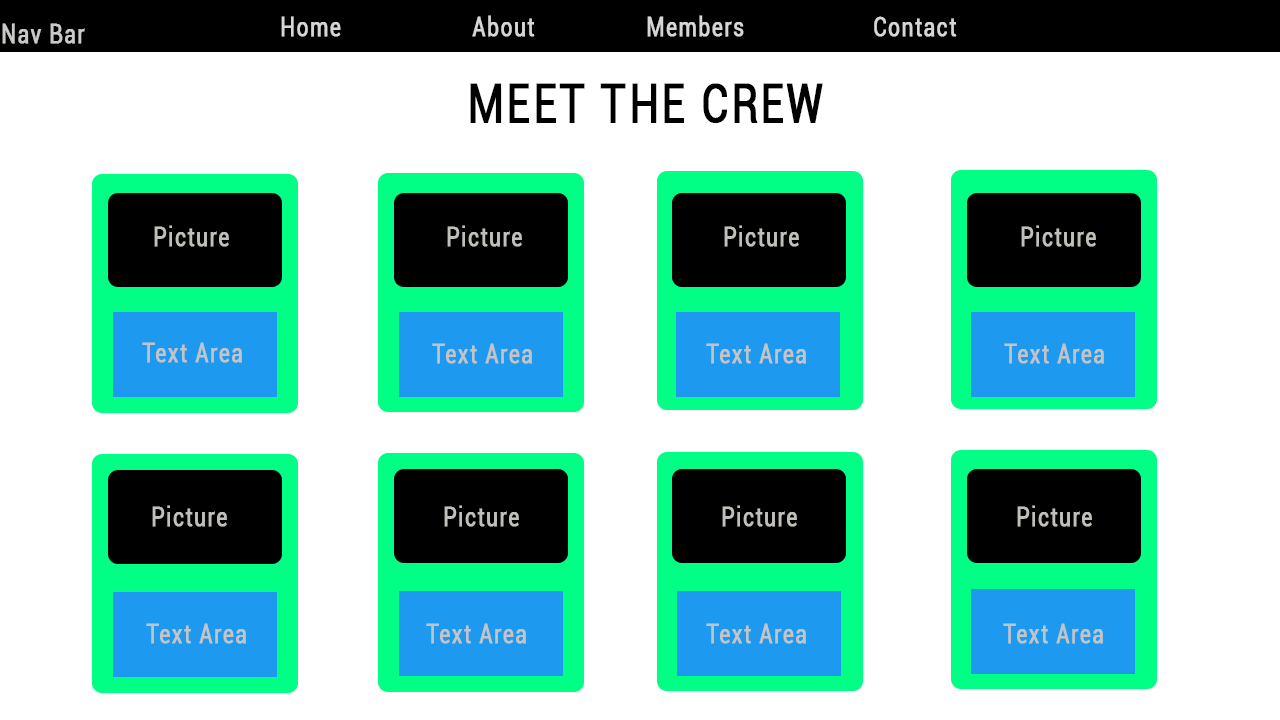
<style>
.page{position:relative;width:1280px;height:720px;background:#ffffff}
.page>*{position:absolute;margin:0}
.t1{font:27.1px "Roboto-Regular";letter-spacing:0.05em;color:#d6d6d6;font-weight:bold;scale:0.77 1}
.t2{font:27.1px "Roboto-Regular";letter-spacing:0.05em;color:#c9c9c7;font-weight:bold;scale:0.77 1}
.t3{font:54.2px "Roboto-Regular";letter-spacing:0.05em;color:#000000;font-weight:bold;scale:0.77 1}
.t4{font:27.1px "Roboto-Regular";letter-spacing:0.05em;color:#c0bfba;font-weight:bold;scale:0.77 1}
.t5{font:27.1px "Roboto-Regular";letter-spacing:0.05em;color:#c2c4c6;font-weight:bold;scale:0.77 1}
</style>
<div class="page">
<p class="t1" style="left:281px;top:16px;width:60px;height:21px">Home</p>
<p class="t1" style="left:472px;top:15px;width:63px;height:22px">About</p>
<p class="t1" style="left:647px;top:15px;width:97px;height:22px">Members</p>
<p class="t1" style="left:874px;top:16px;width:83px;height:21px">Contact</p>
<p class="t2" style="left:2px;top:23px;width:83px;height:21px">Nav Bar</p>
<p class="t3" style="left:470px;top:83px;width:353px;height:40px">MEET THE CREW</p>
<p class="t4" style="left:154px;top:225px;width:75px;height:22px">Picture</p>
<p class="t4" style="left:447px;top:225px;width:75px;height:22px">Picture</p>
<p class="t4" style="left:724px;top:225px;width:75px;height:22px">Picture</p>
<p class="t4" style="left:1021px;top:225px;width:75px;height:22px">Picture</p>
<p class="t5" style="left:142px;top:342px;width:100px;height:21px">Text Area</p>
<p class="t5" style="left:432px;top:343px;width:100px;height:21px">Text Area</p>
<p class="t5" style="left:706px;top:343px;width:100px;height:21px">Text Area</p>
<p class="t5" style="left:1004px;top:343px;width:100px;height:21px">Text Area</p>
<p class="t4" style="left:152px;top:505px;width:75px;height:22px">Picture</p>
<p class="t4" style="left:444px;top:505px;width:75px;height:22px">Picture</p>
<p class="t4" style="left:722px;top:505px;width:75px;height:22px">Picture</p>
<p class="t4" style="left:1017px;top:505px;width:75px;height:22px">Picture</p>
<p class="t5" style="left:146px;top:623px;width:100px;height:21px">Text Area</p>
<p class="t5" style="left:426px;top:623px;width:100px;height:21px">Text Area</p>
<p class="t5" style="left:706px;top:623px;width:100px;height:21px">Text Area</p>
<p class="t5" style="left:1003px;top:623px;width:100px;height:21px">Text Area</p>
</div>
